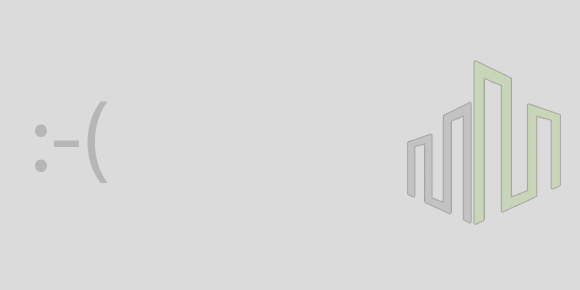
<style>
.page{position:relative;width:580px;height:290px;background:#dbdbdb}
.page>*{position:absolute;margin:0}
.t1{font:100px "MyriadPro-Regular";color:#b6b6b6}
</style>
<div class="page">
<p class="t1" style="left:35px;top:101px;width:73px;height:82px">:-(</p>
</div>
